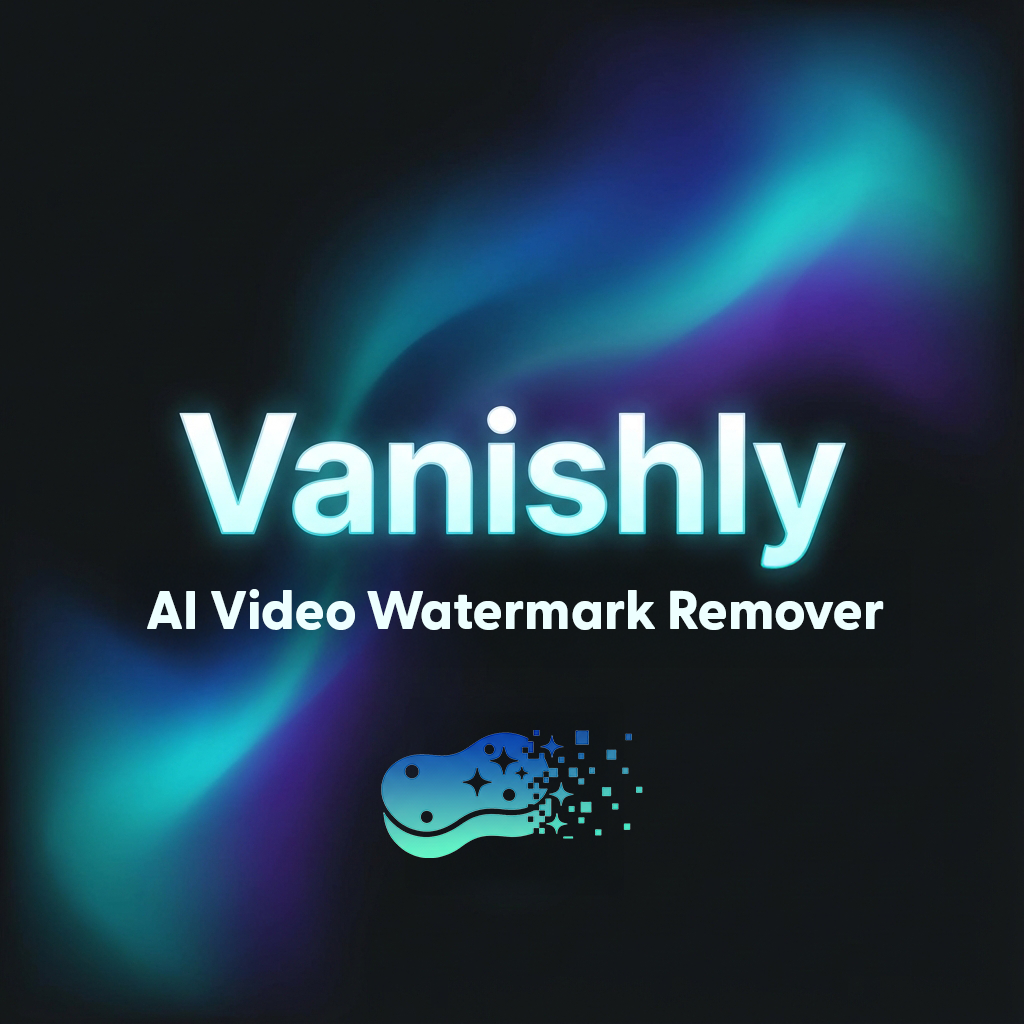
<style>
.page{position:relative;width:1024px;height:1024px}
.page>*{position:absolute;margin:0}
.t1{font:54.2px "FONTSPRINGDEMO-GreycliffCFExtraBoldRegular";color:#edffff}
</style>
<div class="page">
<p class="t1" style="left:147px;top:589px;width:737px;height:41px">AI Video Watermark Remover</p>
</div>
